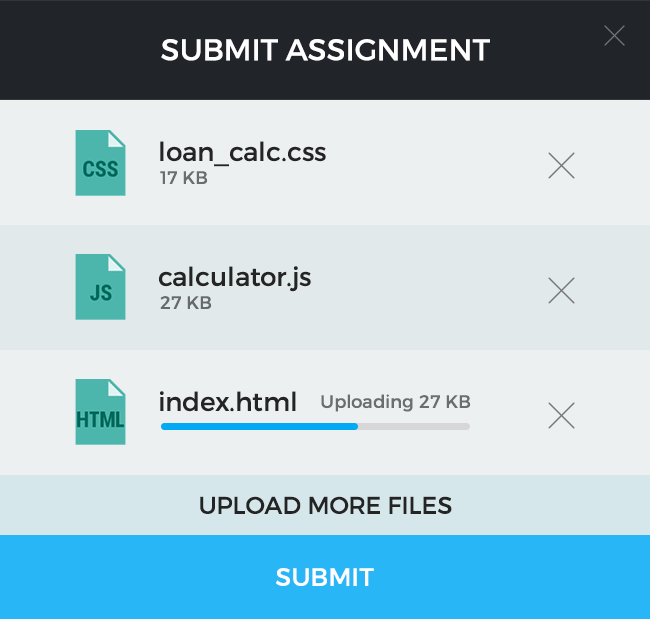
<style>
.page{position:relative;width:650px;height:619px;background:#ecf0f1}
.page>*{position:absolute;margin:0}
.t1{font:30px "Montserrat-Regular";color:#ffffff}
.t2{font:26px "Montserrat-Regular";color:#242424}
.t3{font:18px "Montserrat-Regular";color:#6c6d6e}
.t4{font:18px "Montserrat-Regular";color:#676a6b}
.t5{font:24px "Montserrat-Regular";color:#242424}
.t6{font:25px "Montserrat-Regular";color:#ffffff}
</style>
<div class="page">
<p class="t1" style="left:161px;top:39px;width:329px;height:22px">SUBMIT ASSIGNMENT</p>
<p class="t2" style="left:160px;top:141px;width:166px;height:26px">loan_calc.css</p>
<p class="t3" style="left:160px;top:171px;width:48px;height:13px">17 KB</p>
<p class="t2" style="left:159px;top:266px;width:152px;height:26px">calculator.js</p>
<p class="t4" style="left:160px;top:296px;width:52px;height:13px">27 KB</p>
<p class="t2" style="left:160px;top:391px;width:136px;height:21px">index.html</p>
<p class="t3" style="left:321px;top:394px;width:150px;height:18px">Uploading 27 KB</p>
<p class="t5" style="left:200px;top:496px;width:252px;height:18px">UPLOAD MORE FILES</p>
<p class="t6" style="left:276px;top:568px;width:98px;height:18px">SUBMIT</p>
</div>
